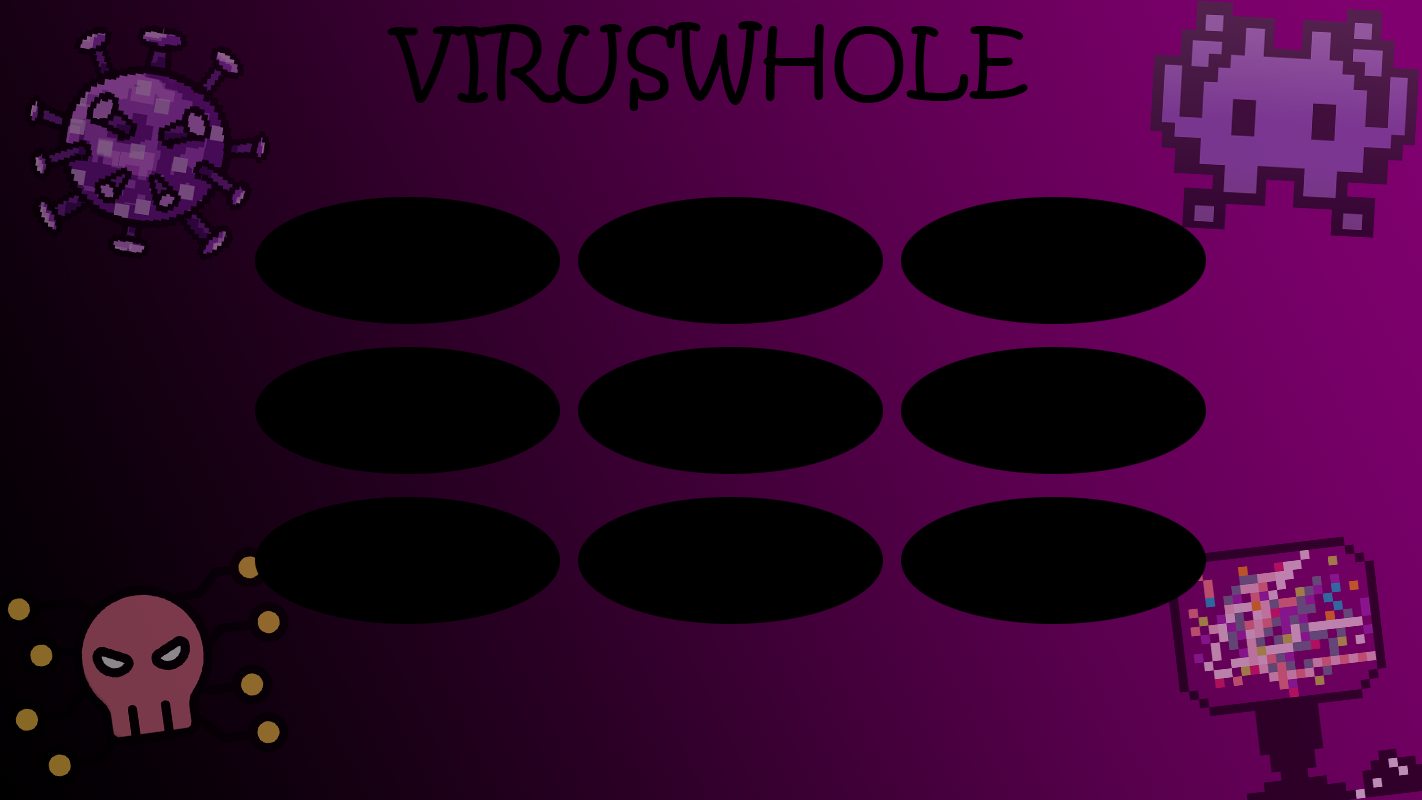
<style>
.page{position:relative;width:1422px;height:800px;background:#000000}
.page>*{position:absolute;margin:0}
.t1{font:85px "KristenITC-Regular";color:#000000}
</style>
<div class="page">
<p class="t1" style="left:387px;top:21px;width:641px;height:90px">VIRUSWHOLE</p>
</div>
